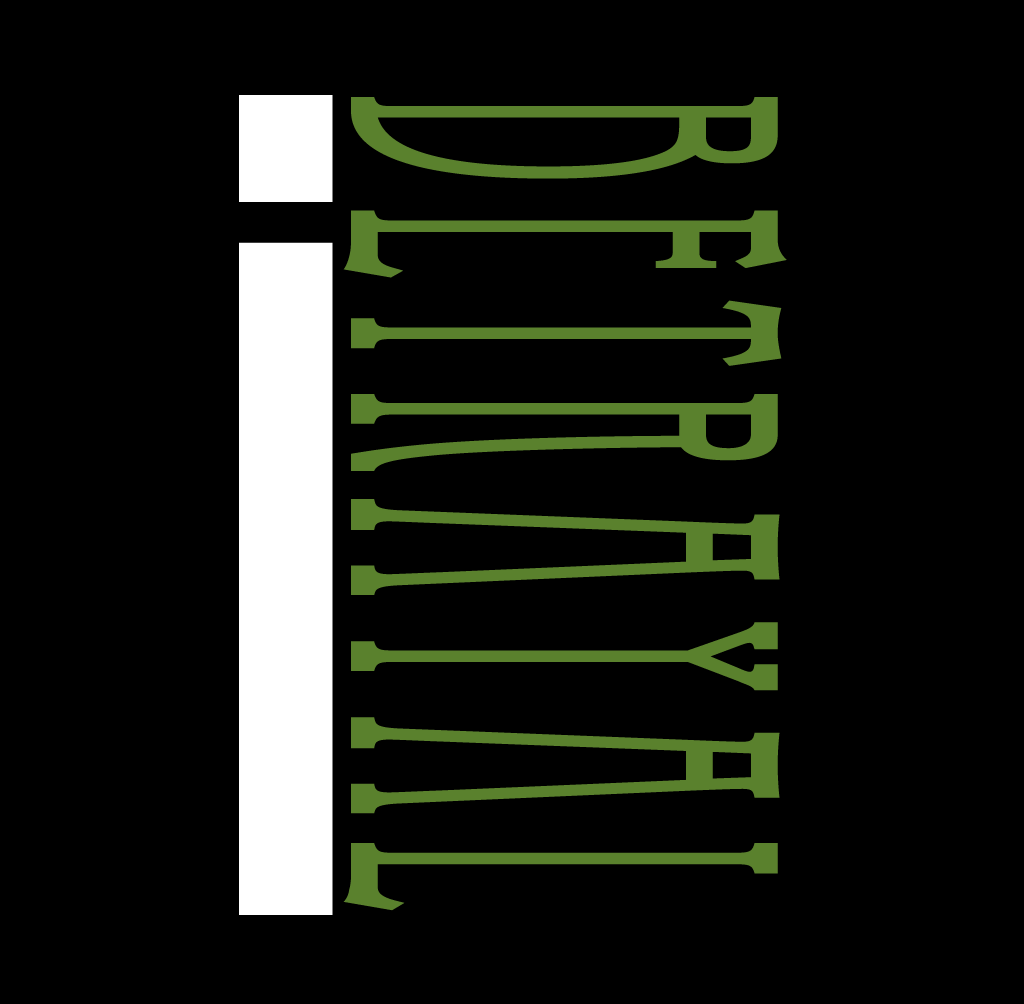
<style>
.page{position:relative;width:1024px;height:1004px;background:#000000}
.page>*{position:absolute;margin:0}
.t1{font:1037.2px "Impact";letter-spacing:0.07em;color:#ffffff;scale:0.44 1}
.t2{font:602.3px "EccentricStd";letter-spacing:0.07em;color:#5b812e;scale:0.37 1}
</style>
<div class="page">
<p class="t1" style="left:239px;top:95px;width:94px;height:820px">i</p>
<p class="t2" style="left:343px;top:97px;width:444px;height:814px;rotate:90deg">Betrayal</p>
</div>
